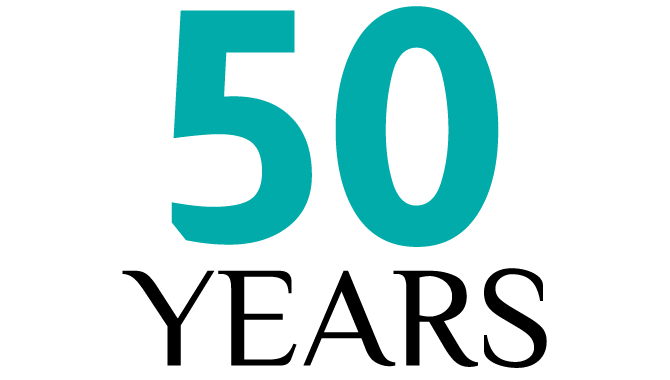
<style>
.page{position:relative;width:670px;height:380px;background:#ffffff}
.page>*{position:absolute;margin:0}
.t1{font:324.1px "Almarai-ExtraBold";color:#00abaa}
.t2{font:143px "Philosopher-Regular";color:#000000}
</style>
<div class="page">
<p class="t1" style="left:171px;top:6px;width:328px;height:241px">50</p>
<p class="t2" style="left:122px;top:268px;width:425px;height:100px">YEARS</p>
</div>
